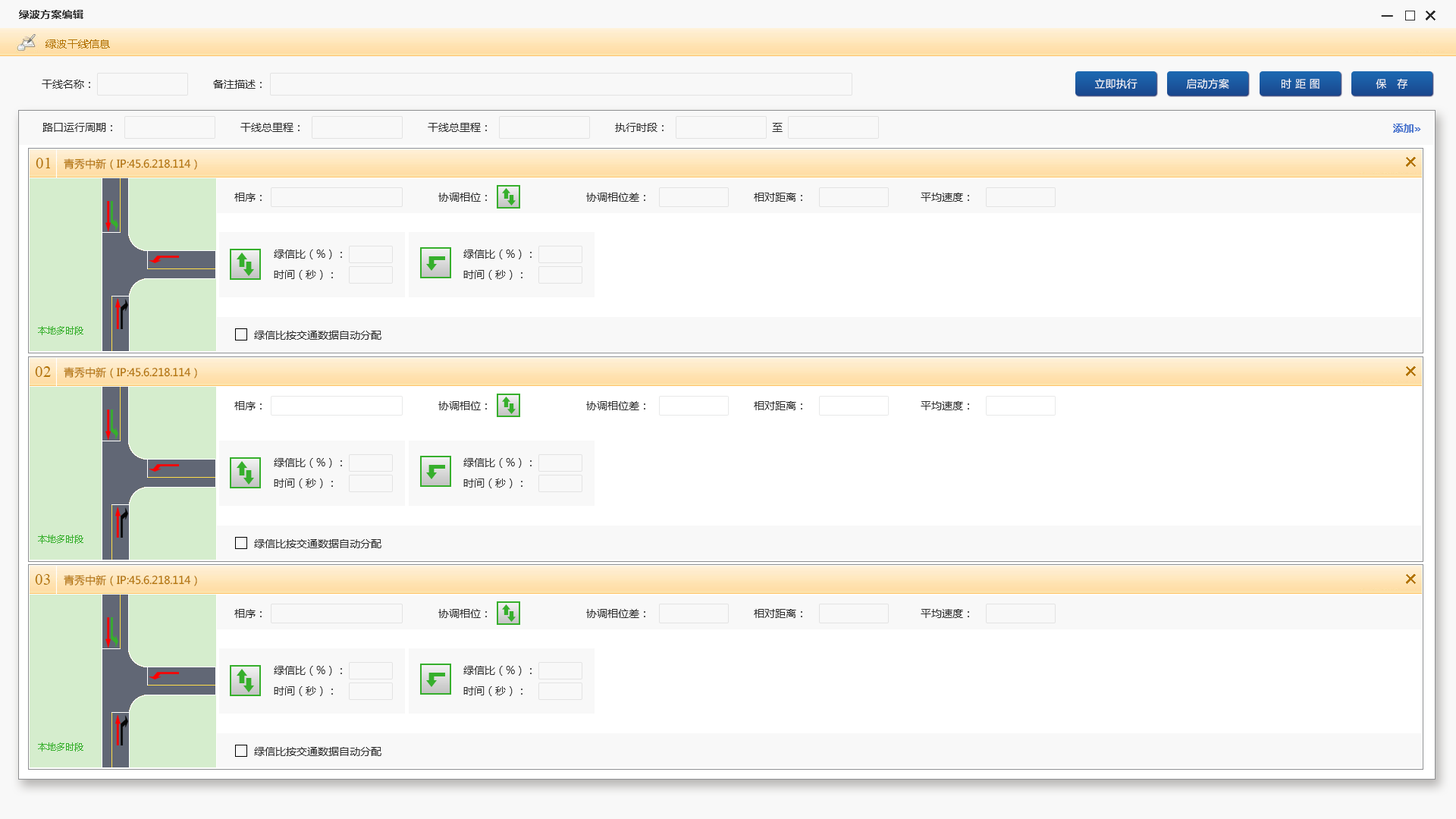
<style>
.page{position:relative;width:1456px;height:819px;background:#ffffff}
.page>*{position:absolute;margin:0}
.t1{font:10.6px "MicrosoftYaHei-Bold";letter-spacing:0.02em;color:#2d2d2d}
.t2{font:24.3px "MicrosoftYaHei";letter-spacing:0.02em;color:#2d2d2d}
.t3{font:10.3px "MicrosoftYaHei";letter-spacing:0.02em;color:#b37405}
.t4{font:10.6px "MicrosoftYaHei";color:#2d2d2d}
.t5{font:10.4px "MicrosoftYaHei";letter-spacing:0.04em;color:#ffffff}
.t6{font:10.6px "MicrosoftYaHei-Bold";letter-spacing:0.02em;color:#3d6dcc}
.t7{font:15.8px "TimesNewRomanPSMT";color:#b37405}
.t8{font:10.6px "MicrosoftYaHei";color:#b37405}
.t9{font:24.3px "MicrosoftYaHei";letter-spacing:0.02em;color:#b37405}
.t10{font:9.1px "MicrosoftYaHei";color:#36af2c}
</style>
<div class="page">
<p class="t1" style="left:19px;top:10px;width:64px;height:9px">绿波方案编辑</p>
<p class="t1" style="left:1381px;top:15px;width:12px;height:2px">—</p>
<p class="t2" style="left:1426px;top:11px;width:10px;height:9px;rotate:-45deg">+</p>
<p class="t3" style="left:45px;top:39px;width:65px;height:10px">绿波干线信息</p>
<p class="t4" style="left:42px;top:80px;width:48px;height:9px">干线名称：</p>
<p class="t4" style="left:213px;top:80px;width:49px;height:9px">备注描述：</p>
<p class="t5" style="left:1095px;top:78px;width:42px;height:11px">立即执行</p>
<p class="t5" style="left:1186px;top:78px;width:43px;height:11px">启动方案</p>
<p class="t5" style="left:1282px;top:78px;width:37px;height:11px">时 距 图</p>
<p class="t5" style="left:1376px;top:78px;width:31px;height:11px">保   存</p>
<p class="t4" style="left:42px;top:123px;width:70px;height:9px">路口运行周期：</p>
<p class="t4" style="left:240px;top:123px;width:60px;height:9px">干线总里程：</p>
<p class="t4" style="left:428px;top:123px;width:59px;height:9px">干线总里程：</p>
<p class="t4" style="left:615px;top:123px;width:49px;height:9px">执行时段：</p>
<p class="t4" style="left:772px;top:123px;width:11px;height:9px">至</p>
<p class="t6" style="left:1393px;top:124px;width:28px;height:9px">添加»</p>
<p class="t7" style="left:36px;top:158px;width:14px;height:10px">01</p>
<p class="t8" style="left:64px;top:158px;width:133px;height:12px">青秀中新（IP:45.6.218.114）</p>
<p class="t9" style="left:1406px;top:157px;width:10px;height:10px;rotate:-45deg">+</p>
<p class="t4" style="left:234px;top:193px;width:28px;height:9px">相序：</p>
<p class="t4" style="left:438px;top:193px;width:49px;height:9px">协调相位：</p>
<p class="t4" style="left:586px;top:193px;width:59px;height:9px">协调相位差：</p>
<p class="t4" style="left:754px;top:193px;width:48px;height:9px">相对距离：</p>
<p class="t4" style="left:921px;top:193px;width:48px;height:9px">平均速度：</p>
<p class="t4" style="left:274px;top:249px;width:68px;height:10px">绿信比（%）：</p>
<p class="t4" style="left:463px;top:249px;width:69px;height:10px">绿信比（%）：</p>
<p class="t4" style="left:274px;top:270px;width:59px;height:10px">时间（秒）：</p>
<p class="t4" style="left:463px;top:270px;width:59px;height:10px">时间（秒）：</p>
<p class="t10" style="left:38px;top:326px;width:45px;height:9px">本地多时段</p>
<p class="t4" style="left:254px;top:331px;width:127px;height:9px">绿信比按交通数据自动分配</p>
<p class="t7" style="left:35px;top:366px;width:16px;height:11px">02</p>
<p class="t8" style="left:64px;top:367px;width:133px;height:11px">青秀中新（IP:45.6.218.114）</p>
<p class="t9" style="left:1406px;top:366px;width:10px;height:10px;rotate:-45deg">+</p>
<p class="t4" style="left:234px;top:401px;width:28px;height:9px">相序：</p>
<p class="t4" style="left:438px;top:401px;width:49px;height:9px">协调相位：</p>
<p class="t4" style="left:586px;top:401px;width:59px;height:9px">协调相位差：</p>
<p class="t4" style="left:754px;top:401px;width:48px;height:9px">相对距离：</p>
<p class="t4" style="left:921px;top:401px;width:48px;height:9px">平均速度：</p>
<p class="t4" style="left:274px;top:458px;width:68px;height:10px">绿信比（%）：</p>
<p class="t4" style="left:463px;top:458px;width:69px;height:10px">绿信比（%）：</p>
<p class="t4" style="left:274px;top:479px;width:59px;height:9px">时间（秒）：</p>
<p class="t4" style="left:463px;top:479px;width:59px;height:9px">时间（秒）：</p>
<p class="t10" style="left:38px;top:535px;width:45px;height:9px">本地多时段</p>
<p class="t4" style="left:254px;top:539px;width:127px;height:9px">绿信比按交通数据自动分配</p>
<p class="t7" style="left:35px;top:574px;width:15px;height:11px">03</p>
<p class="t8" style="left:64px;top:575px;width:133px;height:11px">青秀中新（IP:45.6.218.114）</p>
<p class="t9" style="left:1406px;top:574px;width:10px;height:10px;rotate:-45deg">+</p>
<p class="t4" style="left:234px;top:609px;width:28px;height:9px">相序：</p>
<p class="t4" style="left:438px;top:609px;width:49px;height:9px">协调相位：</p>
<p class="t4" style="left:586px;top:609px;width:59px;height:9px">协调相位差：</p>
<p class="t4" style="left:754px;top:609px;width:48px;height:9px">相对距离：</p>
<p class="t4" style="left:921px;top:609px;width:48px;height:9px">平均速度：</p>
<p class="t4" style="left:274px;top:666px;width:68px;height:10px">绿信比（%）：</p>
<p class="t4" style="left:463px;top:666px;width:69px;height:10px">绿信比（%）：</p>
<p class="t4" style="left:274px;top:686px;width:59px;height:10px">时间（秒）：</p>
<p class="t4" style="left:463px;top:686px;width:59px;height:10px">时间（秒）：</p>
<p class="t10" style="left:38px;top:742px;width:45px;height:9px">本地多时段</p>
<p class="t4" style="left:254px;top:747px;width:127px;height:9px">绿信比按交通数据自动分配</p>
</div>
